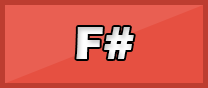
<style>
.page{position:relative;width:208px;height:88px;background:#e65041}
.page>*{position:absolute;margin:0}
.t1{font:48px "ErasITC-Bold";color:#f2f2f2}
</style>
<div class="page">
<p class="t1" style="left:76px;top:27px;width:58px;height:32px">F#</p>
</div>
